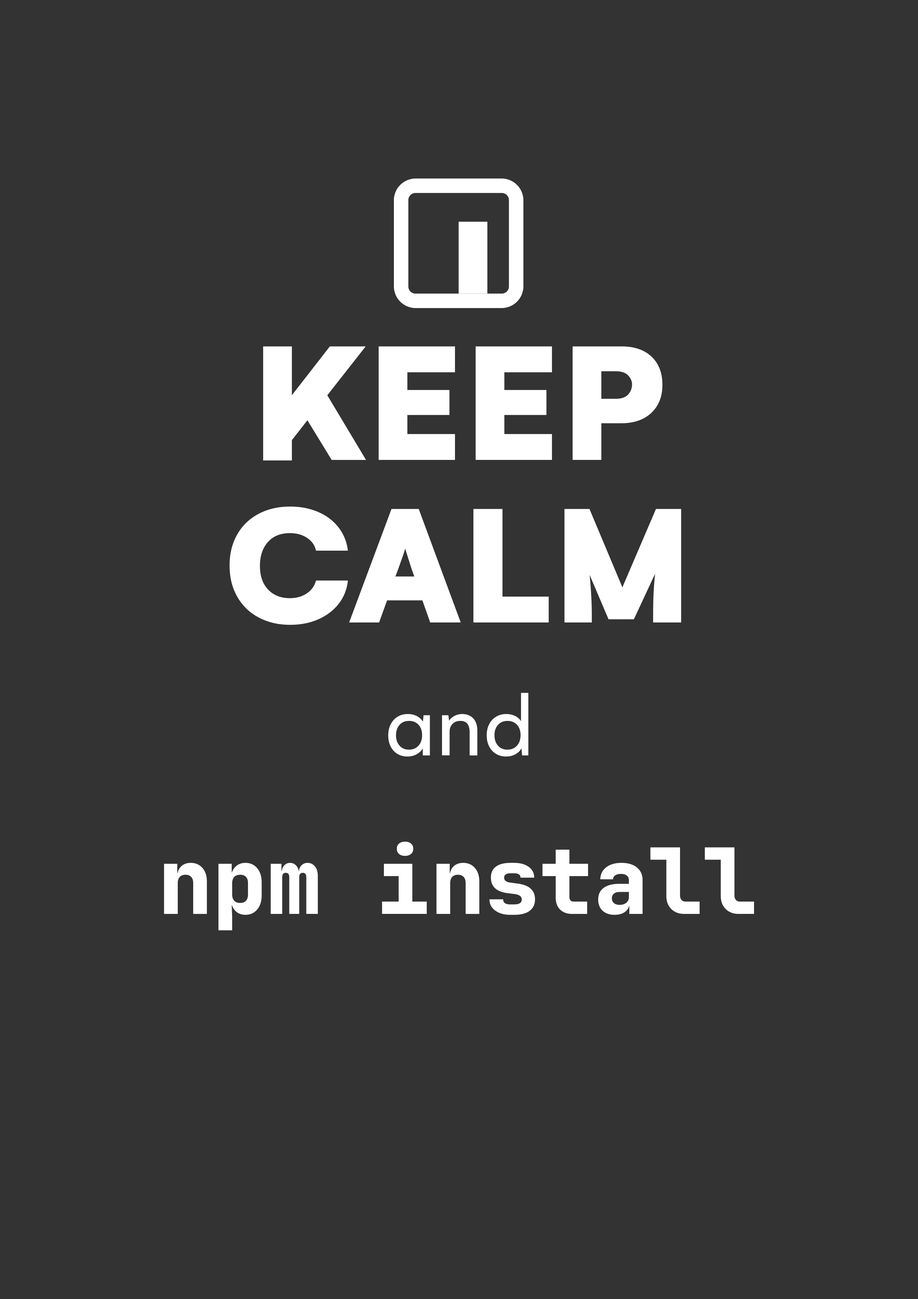
<style>
.page{position:relative;width:918px;height:1299px;background:#333333}
.page>*{position:absolute;margin:0}
.t1{font:176.9px "Gelion-Black";color:#ffffff}
.t2{font:90.9px "Gelion-Regular";color:#ffffff}
.t3{font:90.9px "JetBrainsMono-ExtraBold";color:#ffffff}
</style>
<div class="page">
<p class="t1" style="left:263px;top:346px;width:400px;height:115px">KEEP</p>
<p class="t1" style="left:230px;top:506px;width:452px;height:119px">CALM</p>
<p class="t2" style="left:388px;top:693px;width:141px;height:63px">and</p>
<p class="t3" style="left:164px;top:841px;width:590px;height:89px">npm install</p>
</div>
